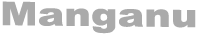
<style>
.page{position:relative;width:200px;height:34px;background:#ffffff}
.page>*{position:absolute;margin:0}
.t1{font:32.7px "Arial-Black";color:#aaaaaa;scale:1.22 1}
</style>
<div class="page">
<p class="t1" style="left:2px;top:1px;width:194px;height:33px;rotate:1deg">Manganu</p>
</div>
